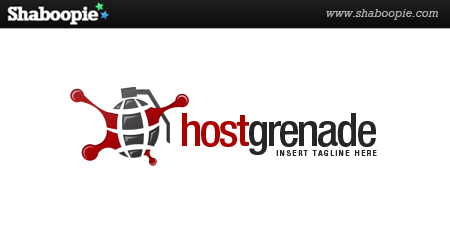
<style>
.page{position:relative;width:450px;height:250px;background:#ffffff}
.page>*{position:absolute;margin:0}
.t1{font:45.8px "HelveticaNeueLTStd-MdCn";letter-spacing:-0.05em;color:#262626}
.t2{font:45.8px "HelveticaNeueLTStd-MdCn";letter-spacing:-0.05em;color:#ab0000}
.t3{font:8.3px "HelveticaNeueLTStd-MdCn";letter-spacing:0.2em;color:#262626}
</style>
<div class="page">
<p class="t1" style="left:182px;top:113px;width:194px;height:42px"><span class="t2">host</span>grenade</p>
<p class="t3" style="left:276px;top:150px;width:101px;height:6px">INSERT TAGLINE HERE</p>
</div>
